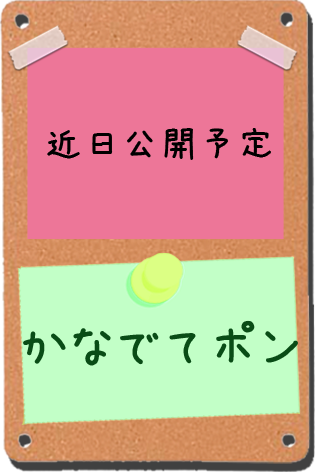
<style>
.page{position:relative;width:315px;height:472px;background:#ed7698}
.page>*{position:absolute;margin:0}
.t1{font:38.6px "APJapanesefontK";color:#000000}
.t2{font:59.8px "APJapanesefontK";color:#094c16}
</style>
<div class="page">
<p class="t1" style="left:47px;top:128px;width:224px;height:32px">近日公開予定</p>
<p class="t2" style="left:23px;top:320px;width:275px;height:46px">かなでてポン</p>
</div>
